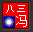
<style>
.page{position:relative;width:33px;height:32px;background:#f20000}
.page>*{position:absolute;margin:0}
.t1{font:10.4px "SimSun";color:#ffffff}
.t2{font:11.7px "SimSun";color:#ffffff}
</style>
<div class="page">
<p class="t1" style="left:6px;top:5px;width:19px;height:8px">八三</p>
<p class="t2" style="left:16px;top:15px;width:11px;height:12px">冯</p>
</div>
